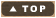
<style>
.page{position:relative;width:56px;height:18px;background:#ffffff}
.page>*{position:absolute;margin:0}
.t1{font:9px "Arial-Black";letter-spacing:0.2em;color:#ffffff}
.t2{font:9px "Batang";letter-spacing:0.2em;color:#ffffff}
</style>
<div class="page">
<p class="t1" style="left:9px;top:5px;width:37px;height:7px"><span class="t2">▲ </span>TOP</p>
</div>
